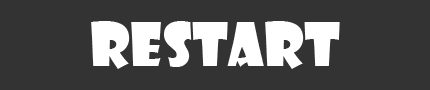
<style>
.page{position:relative;width:430px;height:90px;background:#333333}
.page>*{position:absolute;margin:0}
.t1{font:58.3px "ShowcardGothic-Reg";color:#ffffff}
</style>
<div class="page">
<p class="t1" style="left:91px;top:21px;width:249px;height:48px">restart</p>
</div>
